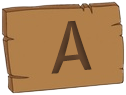
<style>
.page{position:relative;width:126px;height:95px;background:#b17f4a}
.page>*{position:absolute;margin:0}
.t1{font:68px "MyriadPro-Regular";color:#6a4930}
</style>
<div class="page">
<p class="t1" style="left:51px;top:20px;width:41px;height:54px">A</p>
</div>
